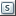
<style>
.page{position:relative;width:16px;height:16px}
.page>*{position:absolute;margin:0}
.t1{font:13px "Calibri-Bold";color:#445962}
</style>
<div class="page">
<p class="t1" style="left:5px;top:5px;width:5px;height:6px">s</p>
</div>
